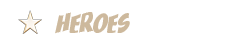
<style>
.page{position:relative;width:250px;height:45px;background:#ffffff}
.page>*{position:absolute;margin:0}
.t1{font:30px "HoustonComicsPersonalUse";color:#cdb99d}
</style>
<div class="page">
<p class="t1" style="left:55px;top:12px;width:75px;height:22px">HEROES</p>
</div>
